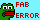
<style>
.page{position:relative;width:40px;height:20px;background:#7af4ff}
.page>*{position:absolute;margin:0}
.t1{font:9.1px "Silkscreen";letter-spacing:-0.14em;color:#ba0000}
</style>
<div class="page">
<p class="t1" style="left:16px;top:2px;width:23px;height:16px">fab<br>error</p>
</div>
